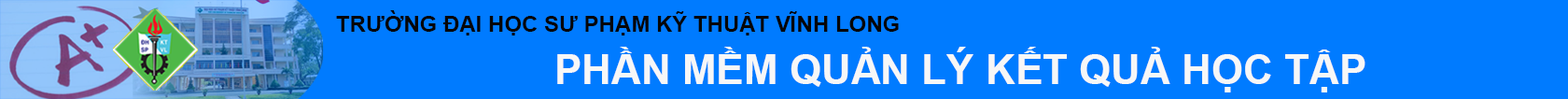
<style>
.page{position:relative;width:1568px;height:99px;background:#007bff}
.page>*{position:absolute;margin:0}
.t1{font:22.4px "Arial-BoldMT";color:#060606}
.t2{font:41.1px "Arial-BoldMT";color:#f7f7f7}
</style>
<div class="page">
<p class="t1" style="left:336px;top:10px;width:563px;height:25px">TRƯỜNG ĐẠI HỌC SƯ PHẠM KỸ THUẬT VĨNH LONG</p>
<p class="t2" style="left:557px;top:47px;width:808px;height:45px">PHẦN MỀM QUẢN LÝ KẾT QUẢ HỌC TẬP</p>
</div>
